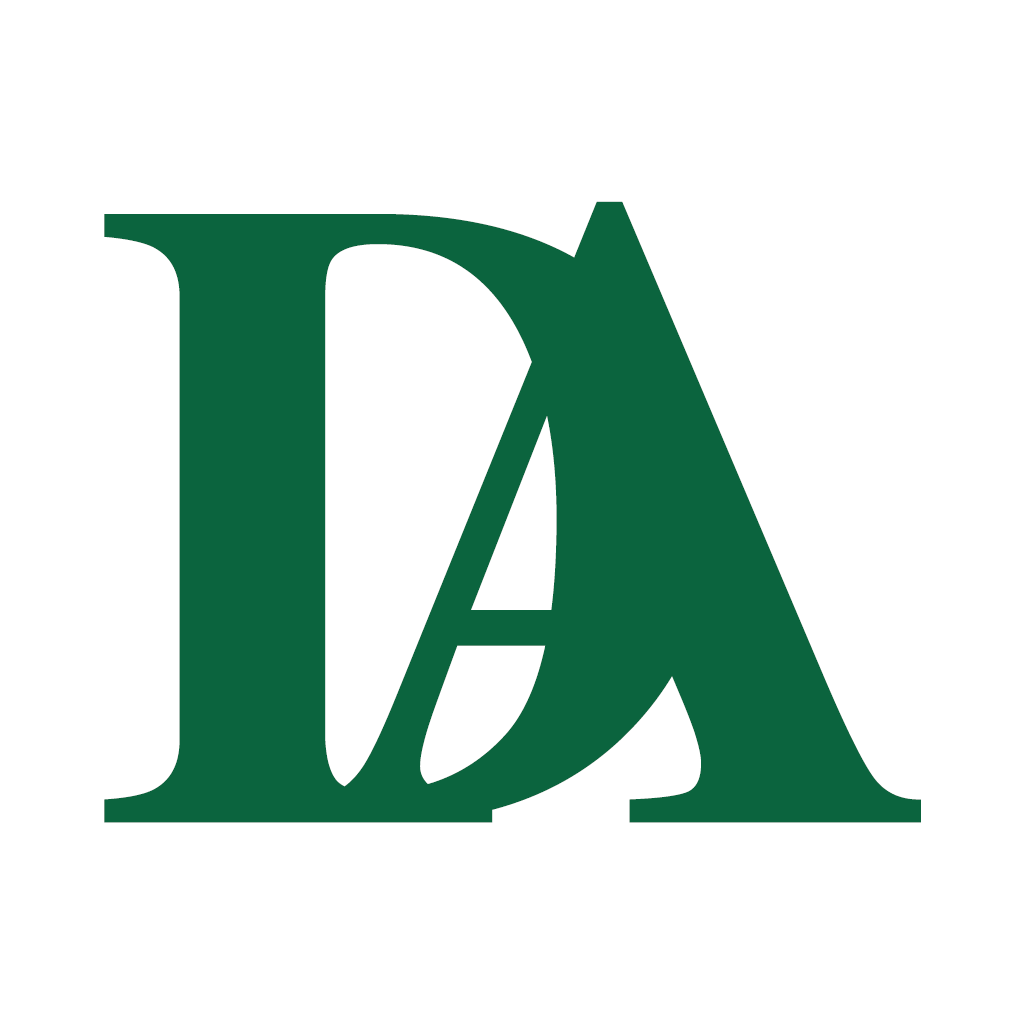
<style>
.page{position:relative;width:1024px;height:1024px;background:#ffffff}
.page>*{position:absolute;margin:0}
.t1{font:900px "Times-Bold";letter-spacing:-0.5em;color:#0b643e}
</style>
<div class="page">
<p class="t1" style="left:104px;top:201px;width:817px;height:622px">DA</p>
</div>
